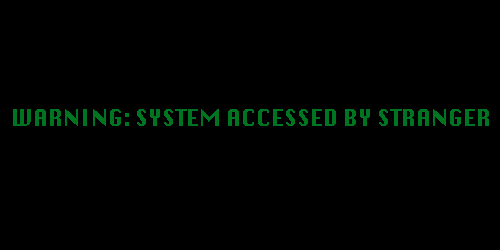
<style>
.page{position:relative;width:500px;height:250px;background:#000000}
.page>*{position:absolute;margin:0}
.t1{font:22px "Krungthep";color:#007521}
</style>
<div class="page">
<p class="t1" style="left:13px;top:109px;width:476px;height:17px">WARNING: SYSTEM ACCESSED BY STRANGER</p>
</div>
